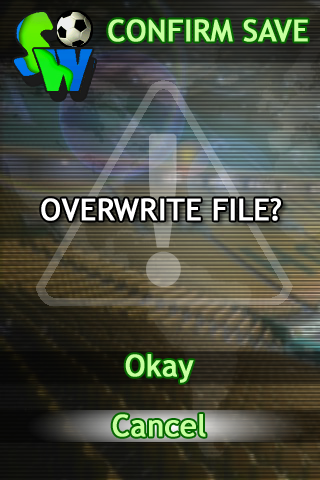
<style>
.page{position:relative;width:320px;height:480px}
.page>*{position:absolute;margin:0}
.t1{font:30px "TrebuchetMS";color:#c8ffa0;font-weight:bold}
.t2{font:200px "TrebuchetMS";font-weight:bold}
.t3{font:30px "TrebuchetMS";color:#ffffff;font-weight:bold}
.t4{font:30px/60px "TrebuchetMS";color:#c8ffa0;font-weight:bold}
</style>
<div class="page">
<p class="t1" style="left:108px;top:19px;width:200px;height:23px">CONFIRM SAVE</p>
<p class="t2" style="left:146px;top:133px;width:35px;height:154px">!</p>
<p class="t3" style="left:41px;top:198px;width:240px;height:23px">OVERWRITE FILE?</p>
<p class="t4" style="left:112px;top:354px;width:94px;height:83px;text-align:center">Okay<br>Cancel</p>
</div>
